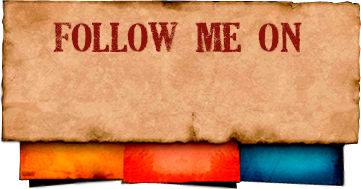
<style>
.page{position:relative;width:361px;height:189px}
.page>*{position:absolute;margin:0}
.t1{font:36.4px "DEAD-SECRETARY";color:#8d1109;scale:1.36 1}
</style>
<div class="page">
<p class="t1" style="left:53px;top:21px;width:249px;height:32px">follow me on</p>
</div>
